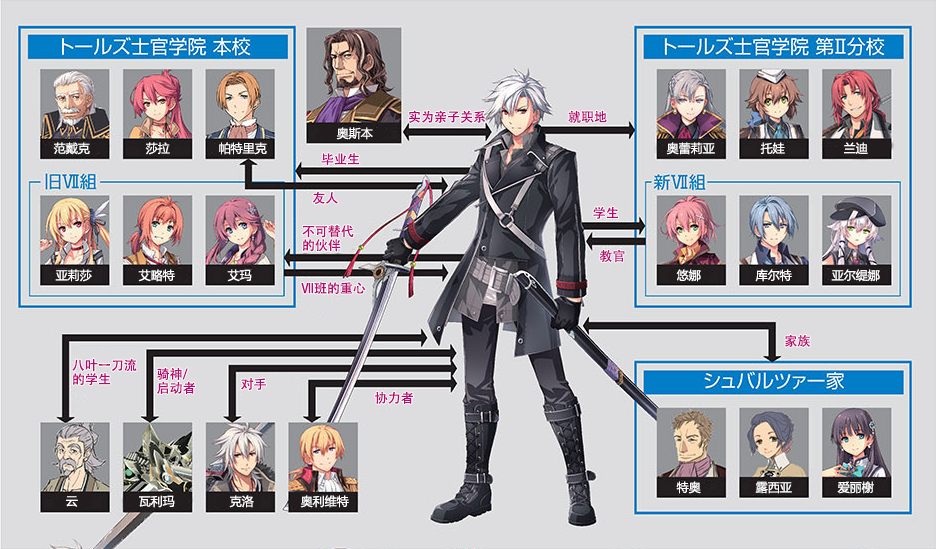
<style>
.page{position:relative;width:936px;height:549px;background:#dddddf}
.page>*{position:absolute;margin:0}
.t1{font:13px "AdobeHeitiStd-Regular";color:#b70773}
.t2{font:12px "MicrosoftYaHei";color:#ffffff}
.t3{font:13px/14px "AdobeHeitiStd-Regular";color:#b70773}
</style>
<div class="page">
<p class="t1" style="left:409px;top:110px;width:77px;height:13px">实为亲子关系</p>
<p class="t1" style="left:568px;top:110px;width:39px;height:13px">就职地</p>
<p class="t2" style="left:336px;top:127px;width:37px;height:13px">奥斯本</p>
<p class="t2" style="left:53px;top:142px;width:37px;height:13px">范戴克</p>
<p class="t2" style="left:145px;top:142px;width:25px;height:13px">莎拉</p>
<p class="t2" style="left:219px;top:142px;width:48px;height:13px">帕特里克</p>
<p class="t2" style="left:666px;top:142px;width:49px;height:13px">奥蕾莉亚</p>
<p class="t2" style="left:760px;top:142px;width:25px;height:12px">托娃</p>
<p class="t2" style="left:844px;top:142px;width:24px;height:12px">兰迪</p>
<p class="t1" style="left:321px;top:153px;width:39px;height:13px">毕业生</p>
<p class="t1" style="left:312px;top:191px;width:26px;height:13px">友人</p>
<p class="t1" style="left:593px;top:206px;width:25px;height:13px">学生</p>
<p class="t3" style="left:302px;top:225px;width:52px;height:27px">不可替代<br>的伙伴</p>
<p class="t1" style="left:599px;top:249px;width:26px;height:14px">教官</p>
<p class="t2" style="left:55px;top:269px;width:37px;height:13px">亚莉莎</p>
<p class="t2" style="left:138px;top:269px;width:37px;height:13px">艾略特</p>
<p class="t2" style="left:227px;top:269px;width:25px;height:13px">艾玛</p>
<p class="t2" style="left:676px;top:269px;width:25px;height:13px">悠娜</p>
<p class="t2" style="left:755px;top:269px;width:37px;height:13px">库尔特</p>
<p class="t2" style="left:831px;top:269px;width:49px;height:13px">亚尔缇娜</p>
<p class="t1" style="left:301px;top:282px;width:65px;height:12px">Ⅶ班的重心</p>
<p class="t1" style="left:785px;top:335px;width:25px;height:12px">家族</p>
<p class="t3" style="left:72px;top:359px;width:65px;height:27px">八叶一刀流<br>的学生</p>
<p class="t3" style="left:157px;top:367px;width:38px;height:27px">骑神/<br>启动者</p>
<p class="t1" style="left:241px;top:377px;width:25px;height:13px">对手</p>
<p class="t1" style="left:375px;top:391px;width:38px;height:13px">协力者</p>
<p class="t2" style="left:676px;top:481px;width:25px;height:13px">特奥<br>特奥</p>
<p class="t2" style="left:755px;top:481px;width:37px;height:13px">露西亚</p>
<p class="t2" style="left:837px;top:481px;width:37px;height:13px">爱丽榭</p>
<p class="t2" style="left:66px;top:496px;width:12px;height:11px">云</p>
<p class="t2" style="left:139px;top:495px;width:36px;height:13px">瓦利玛</p>
<p class="t2" style="left:229px;top:495px;width:25px;height:13px">克洛</p>
<p class="t2" style="left:300px;top:495px;width:49px;height:13px">奥利维特</p>
</div>
